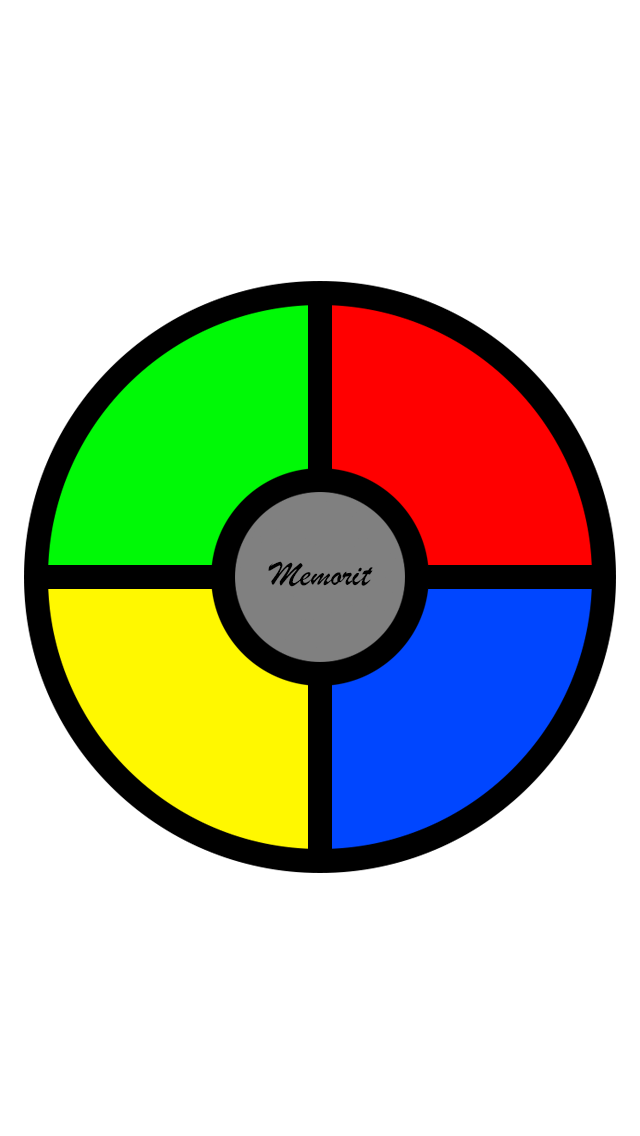
<style>
.page{position:relative;width:640px;height:1136px;background:#ffffff}
.page>*{position:absolute;margin:0}
.t1{font:36px "BrushScriptMT";color:#000000}
</style>
<div class="page">
<p class="t1" style="left:268px;top:561px;width:105px;height:26px">Memorit</p>
</div>
